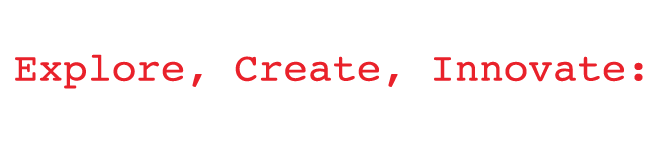
<style>
.page{position:relative;width:665px;height:145px;background:#ffffff}
.page>*{position:absolute;margin:0}
.t1{font:40.2px "Courier";color:#e9212a}
</style>
<div class="page">
<p class="t1" style="left:15px;top:54px;width:628px;height:35px">Explore, Create, Innovate:</p>
</div>
